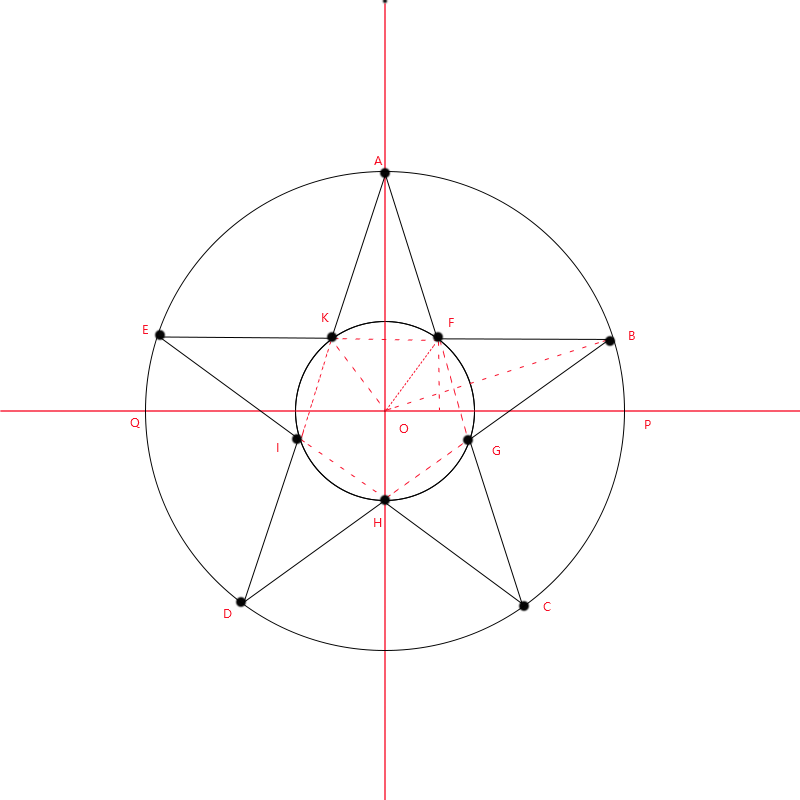
<style>
.page{position:relative;width:800px;height:800px;background:#ffffff}
.page>*{position:absolute;margin:0}
.t1{font:12px "MicrosoftYaHei";color:#f80c27}
.t2{font:12px "MicrosoftYaHei"}
</style>
<div class="page">
<p class="t1" style="left:374px;top:156px;width:9px;height:9px">A</p>
<p class="t1" style="left:322px;top:313px;width:7px;height:9px">K</p>
<p class="t1" style="left:449px;top:318px;width:5px;height:9px">F</p>
<p class="t1" style="left:143px;top:325px;width:5px;height:9px">E</p>
<p class="t1" style="left:629px;top:331px;width:6px;height:9px">B</p>
<p class="t1" style="left:130px;top:418px;width:10px;height:10px">Q</p>
<p class="t1" style="left:399px;top:424px;width:10px;height:9px">O</p>
<p class="t1" style="left:645px;top:420px;width:6px;height:9px">P</p>
<p class="t2" style="left:277px;top:443px;width:2px;height:9px">I</p>
<p class="t1" style="left:492px;top:446px;width:8px;height:9px">G</p>
<p class="t1" style="left:374px;top:518px;width:8px;height:9px">H</p>
<p class="t1" style="left:543px;top:602px;width:8px;height:9px">C</p>
<p class="t1" style="left:224px;top:609px;width:8px;height:9px">D</p>
</div>
